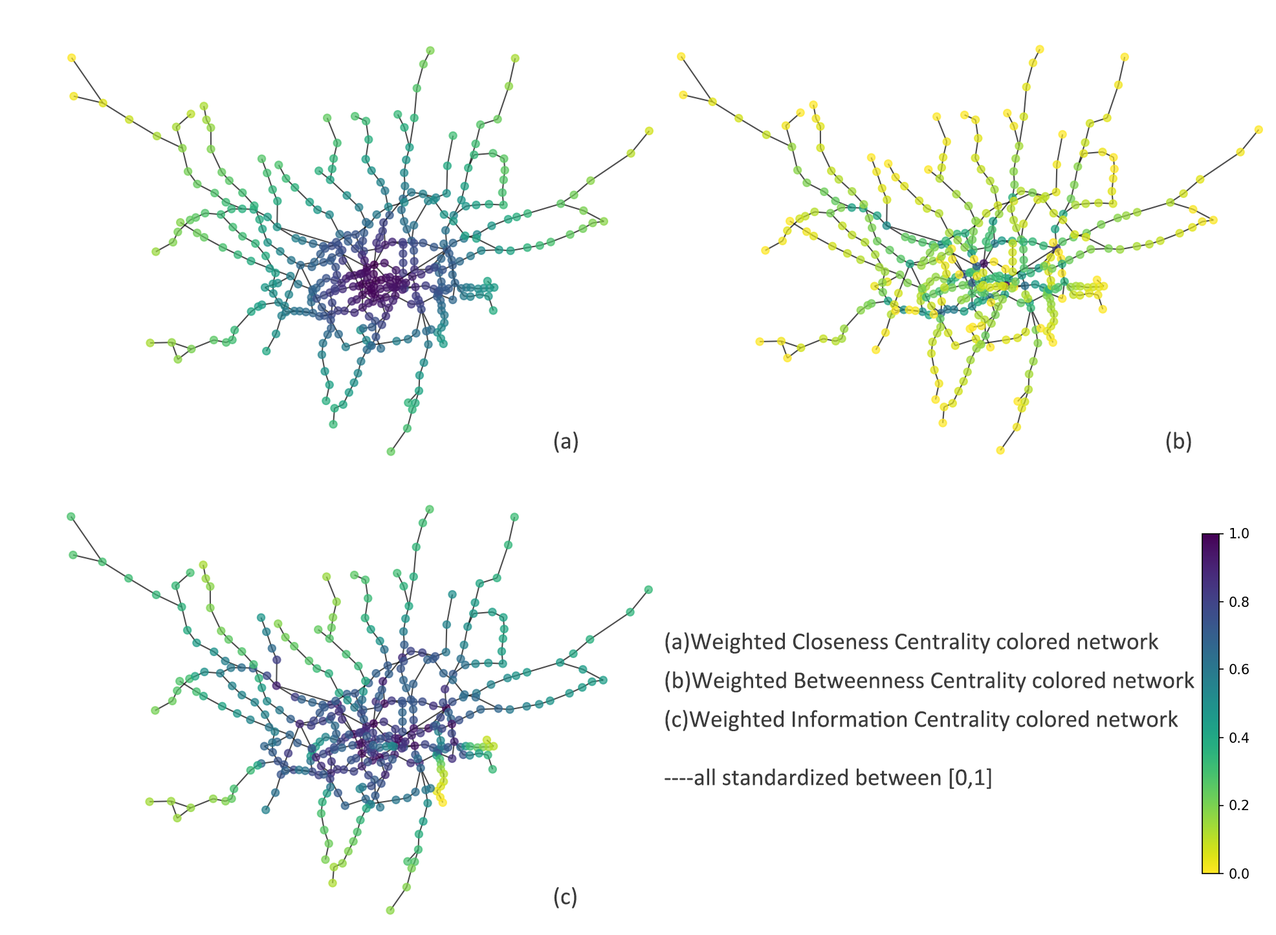
<style>
.page{position:relative;width:1276px;height:935px;background:#ffffff}
.page>*{position:absolute;margin:0}
.t1{font:24.3px "Calibri";color:#3b3b3b}
.t2{font:24.3px/19.4px "Calibri";color:#3b3b3b}
</style>
<div class="page">
<p class="t1" style="left:554px;top:431px;width:24px;height:22px">(a)</p>
<p class="t1" style="left:1166px;top:431px;width:25px;height:22px">(b)</p>
<p class="t2" style="left:664px;top:632px;width:530px;height:157px">(a)Weighted Closeness Centrality colored network<br><br>(b)Weighted Betweenness Centrality colored network<br><br>(c)Weighted Information Centrality colored network<br><br><br>----all standardized between [0,1]</p>
<p class="t1" style="left:554px;top:887px;width:22px;height:21px">(c)</p>
</div>
